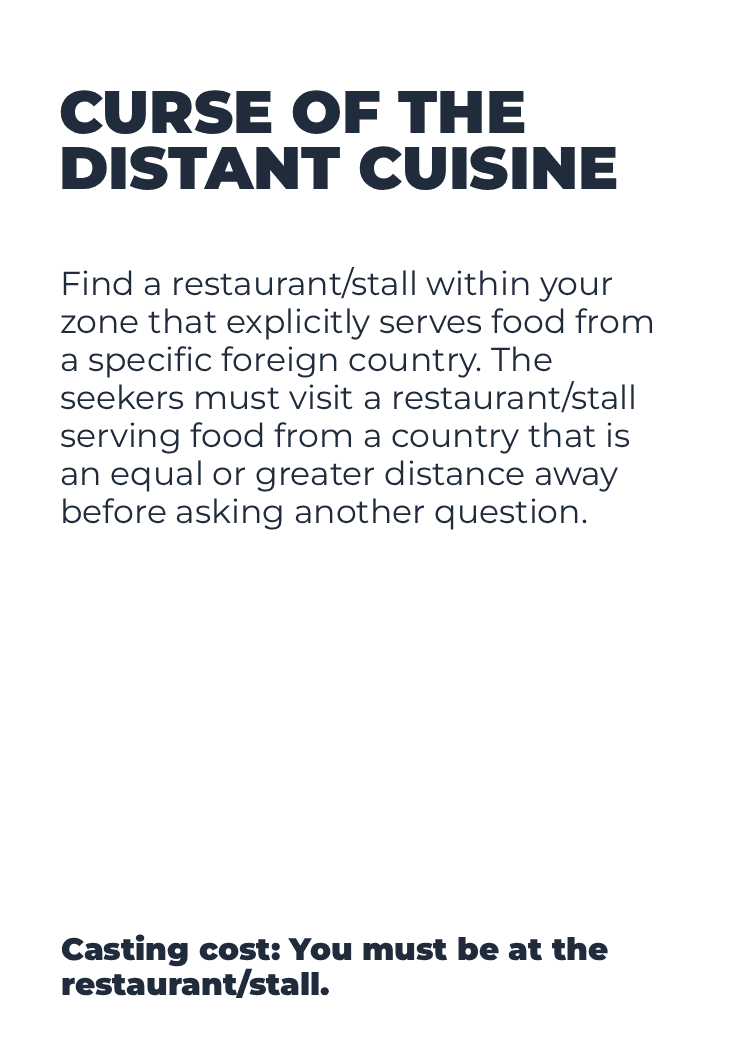
<style>
.page{position:relative;width:750px;height:1050px;background:#ffffff}
.page>*{position:absolute;margin:0}
.t1{font:59.8px/56.4px "Montserrat-Black";color:#202c3c}
.t2{font:33.1px/38px "Montserrat-Regular";color:#202c3c}
.t3{font:31.1px/35.6px "Montserrat-Black";color:#202c3c}
</style>
<div class="page">
<p class="t1" style="left:60px;top:90px;width:557px;height:100px">CURSE OF THE<br>DISTANT CUISINE</p>
<p class="t2" style="left:60px;top:267px;width:593px;height:263px">Find a restaurant/stall within your<br>zone that explicitly serves food from<br>a specific foreign country. The<br>seekers must visit a restaurant/stall<br>serving food from a country that is<br>an equal or greater distance away<br>before asking another question.</p>
<p class="t3" style="left:61px;top:934px;width:547px;height:65px">Casting cost: You must be at the<br>restaurant/stall.</p>
</div>
